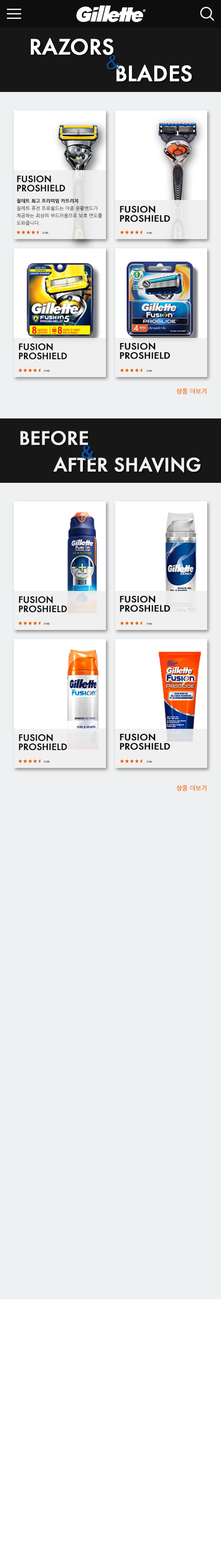
<style>
.page{position:relative;width:221px;height:1568px;background:#eff0f1}
.page>*{position:absolute;margin:0}
.t1{font:23px "FuturaTEE-Medi";color:#ffffff;font-weight:bold}
.t2{font:18.4px "Futura-Light";color:#0c4da2;font-weight:bold}
.t3{font:9.7px/9.2px "FuturaTEE-Medi";color:#0e0e0e;font-weight:bold}
.t4{font:4.6px/7.4px "NanumGothicLight";color:#0e0e0e;font-weight:bold}
.t5{font:4.6px/7.4px "NanumGothicBold";color:#0e0e0e;font-weight:bold}
.t6{font:9.7px/9.2px "FuturaTEE-Medi";color:#0e0e0e;font-weight:bold;scale:1.06 1}
.t7{font:2.5px "MyriadPro-Regular";letter-spacing:0.01em;font-weight:bold}
.t8{font:2.2px "MyriadPro-Regular";letter-spacing:0.01em;font-weight:bold}
.t9{font:6px "NanumGothic";color:#ee6600;font-weight:bold}
.t10{font:20.3px "FuturaTEE-Medi";color:#f0f1f2;font-weight:bold}
.t11{font:19.5px "MyriadPro-Regular";color:#0c4da2;font-weight:bold}
</style>
<div class="page">
<p class="t1" style="left:31px;top:38px;width:83px;height:17px">RAZORS</p>
<p class="t2" style="left:107px;top:55px;width:12px;height:14px">&amp;</p>
<p class="t1" style="left:116px;top:64px;width:76px;height:18px">BLADES</p>
<p class="t3" style="left:17px;top:175px;width:48px;height:17px">FUSION <br>PROSHIELD</p>
<p class="t4" style="left:17px;top:199px;width:85px;height:26px"><span class="t5">질레트 최고 프리미엄 카트리지 <br></span>질레트 퓨전 프로쉴드는 이중 윤활밴드가 <br>제공하는 최상의 부드러움으로 보호 면도를<br>도와줍니다.</p>
<p class="t6" style="left:120px;top:206px;width:50px;height:16px">FUSION <br>PROSHIELD</p>
<p class="t7" style="left:42px;top:232px;width:6px;height:2px">(158)</p>
<p class="t8" style="left:146px;top:232px;width:6px;height:2px">(158)</p>
<p class="t3" style="left:19px;top:343px;width:48px;height:17px">FUSION <br>PROSHIELD</p>
<p class="t6" style="left:120px;top:343px;width:50px;height:16px">FUSION <br>PROSHIELD</p>
<p class="t7" style="left:44px;top:370px;width:6px;height:2px">(158)</p>
<p class="t8" style="left:146px;top:370px;width:6px;height:2px">(158)</p>
<p class="t9" style="left:176px;top:388px;width:30px;height:6px">상품 더보기</p>
<p class="t10" style="left:20px;top:431px;width:68px;height:14px">BEFORE</p>
<p class="t11" style="left:81px;top:445px;width:12px;height:13px">&amp;</p>
<p class="t10" style="left:53px;top:457px;width:147px;height:16px">AFTER SHAVING</p>
<p class="t3" style="left:19px;top:596px;width:48px;height:16px">FUSION <br>PROSHIELD</p>
<p class="t6" style="left:120px;top:595px;width:50px;height:17px">FUSION <br>PROSHIELD</p>
<p class="t7" style="left:44px;top:623px;width:6px;height:2px">(158)</p>
<p class="t8" style="left:146px;top:623px;width:6px;height:2px">(158)</p>
<p class="t3" style="left:19px;top:734px;width:48px;height:16px">FUSION <br>PROSHIELD</p>
<p class="t6" style="left:120px;top:733px;width:50px;height:17px">FUSION <br>PROSHIELD</p>
<p class="t7" style="left:44px;top:761px;width:6px;height:2px">(158)</p>
<p class="t8" style="left:146px;top:761px;width:6px;height:2px">(158)</p>
<p class="t9" style="left:176px;top:785px;width:30px;height:6px">상품 더보기</p>
</div>
